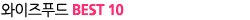
<style>
.page{position:relative;width:250px;height:20px;background:#ffffff}
.page>*{position:absolute;margin:0}
.t1{font:15.5px "FrutigerLTStd-Bold";letter-spacing:-0.025em;color:#ff2c71;text-transform:uppercase;scale:0.95 1}
.t2{font:15.5px "NanumGothic";letter-spacing:-0.025em;color:#010101;scale:0.95 1}
</style>
<div class="page">
<p class="t1" style="left:1px;top:2px;width:123px;height:16px"><span class="t2">와이즈푸드 </span>best 10</p>
</div>
